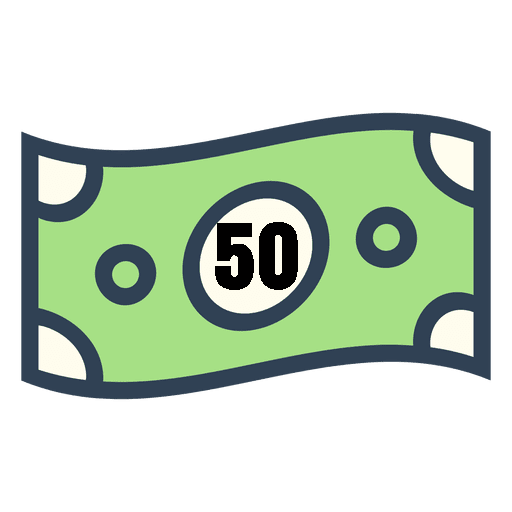
<style>
.page{position:relative;width:512px;height:512px;background:#ffffff}
.page>*{position:absolute;margin:0}
.t1{font:84.6px "Anton";color:#010000;text-transform:uppercase}
</style>
<div class="page">
<p class="t1" style="left:215px;top:222px;width:83px;height:68px">50</p>
</div>
